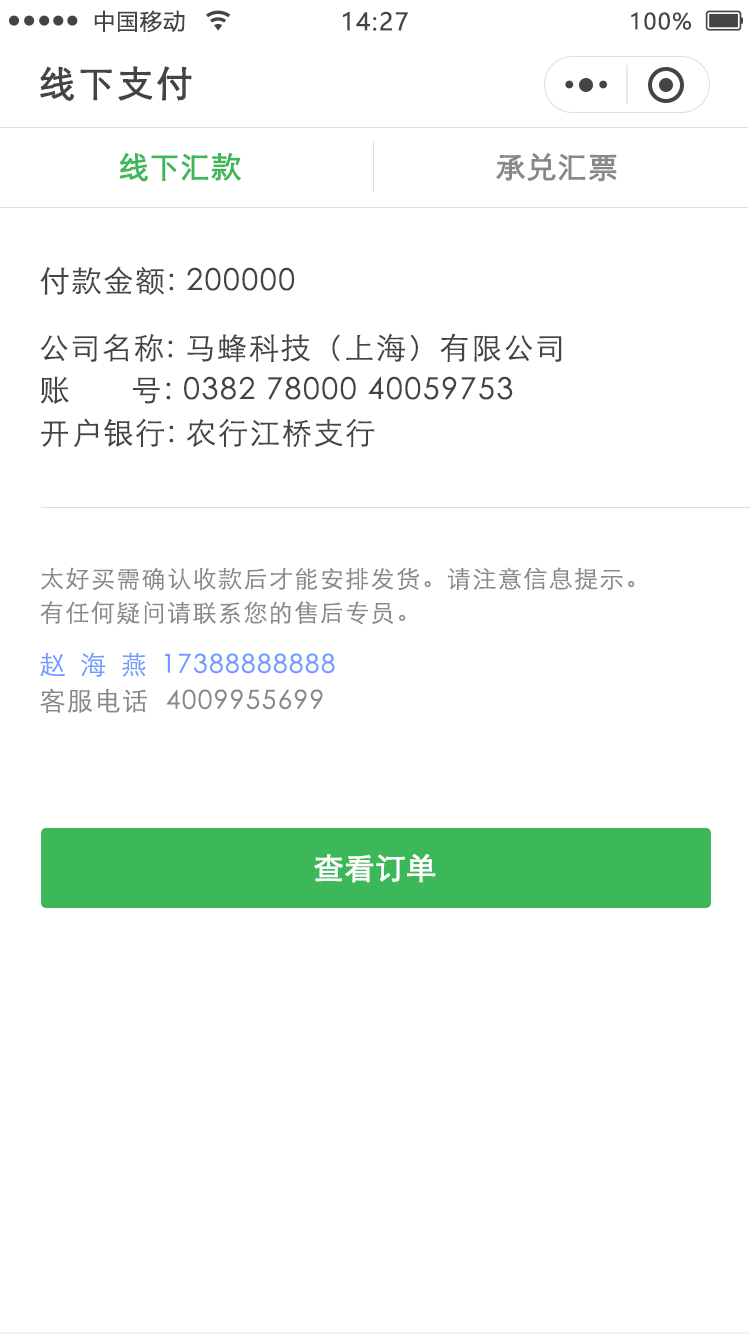
<style>
.page{position:relative;width:750px;height:1334px;background:#ffffff}
.page>*{position:absolute;margin:0}
.t1{font:22px "MicrosoftYaHei";letter-spacing:0.06em;color:#444444}
.t2{font:24px "MicrosoftYaHei";letter-spacing:0.06em;color:#444444}
.t3{font:36px "STXihei";letter-spacing:0.06em;color:#444444;font-weight:bold}
.t4{font:30px "STXihei";color:#3db858;font-weight:bold}
.t5{font:30px "STXihei";color:#888888;font-weight:bold}
.t6{font:30px "STXihei";letter-spacing:0.06em;color:#444444}
.t7{font:30px "STXihei";letter-spacing:0.08em;color:#444444}
.t8{font:24px "STXihei";letter-spacing:0.06em;color:#888888}
.t9{font:26px "STXihei";letter-spacing:0.06em;color:#739bff}
.t10{font:26px "STXihei";letter-spacing:0.56em;color:#739bff}
.t11{font:26px "STXihei";letter-spacing:0.06em;color:#888888}
.t12{font:30px "STXihei";color:#ffffff;font-weight:bold}
</style>
<div class="page">
<p class="t1" style="left:94px;top:10px;width:91px;height:23px">中国移动</p>
<p class="t2" style="left:343px;top:11px;width:65px;height:20px">14:27</p>
<p class="t1" style="left:631px;top:12px;width:60px;height:18px">100%</p>
<p class="t3" style="left:40px;top:66px;width:152px;height:35px">线下支付</p>
<p class="t4" style="left:119px;top:152px;width:122px;height:30px">线下汇款</p>
<p class="t5" style="left:496px;top:153px;width:121px;height:29px">承兑汇票</p>
<p class="t6" style="left:40px;top:266px;width:255px;height:29px">付款金额: 200000</p>
<p class="t6" style="left:40px;top:333px;width:522px;height:29px">公司名称: 马蜂科技（上海）有限公司</p>
<p class="t6" style="left:40px;top:376px;width:473px;height:28px"><span class="t7">账      号</span>: 0382 78000 40059753</p>
<p class="t6" style="left:41px;top:418px;width:334px;height:29px">开户银行: 农行江桥支行</p>
<p class="t8" style="left:41px;top:567px;width:594px;height:24px">太好买需确认收款后才能安排发货。请注意信息提示。</p>
<p class="t8" style="left:40px;top:601px;width:366px;height:24px">有任何疑问请联系您的售后专员。</p>
<p class="t9" style="left:40px;top:652px;width:295px;height:25px"><span class="t10">赵海燕</span>17388888888</p>
<p class="t11" style="left:40px;top:688px;width:283px;height:25px">客服电话  4009955699</p>
<p class="t12" style="left:314px;top:853px;width:122px;height:30px">查看订单</p>
</div>
